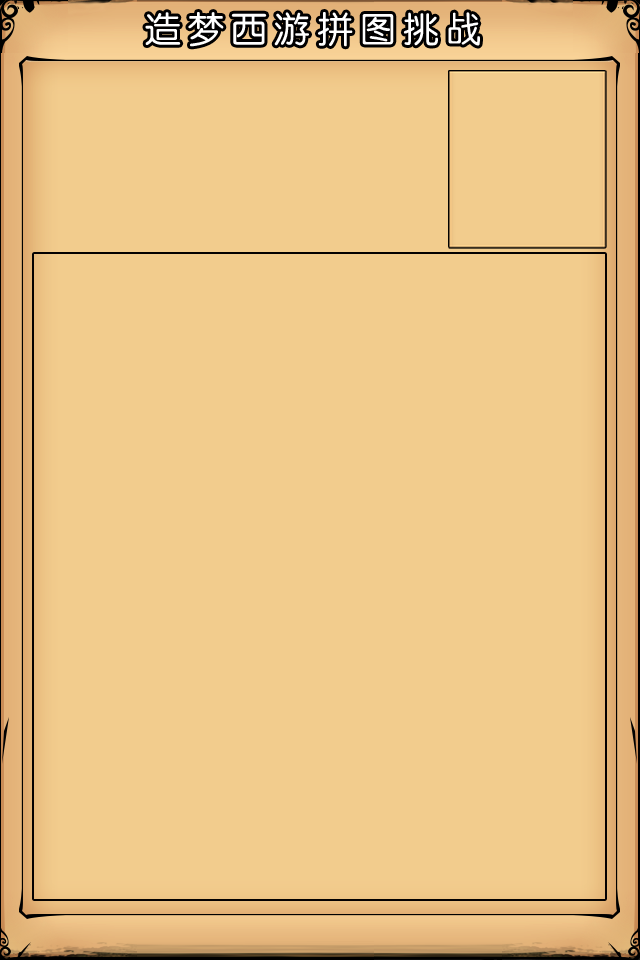
<style>
.page{position:relative;width:640px;height:960px;background:#f2cc8d}
.page>*{position:absolute;margin:0}
.t1{font:36px "FZY3JW--GB1-0";letter-spacing:0.2em;color:#ffffff}
</style>
<div class="page">
<p class="t1" style="left:145px;top:12px;width:335px;height:35px">造梦西游拼图挑战</p>
</div>
